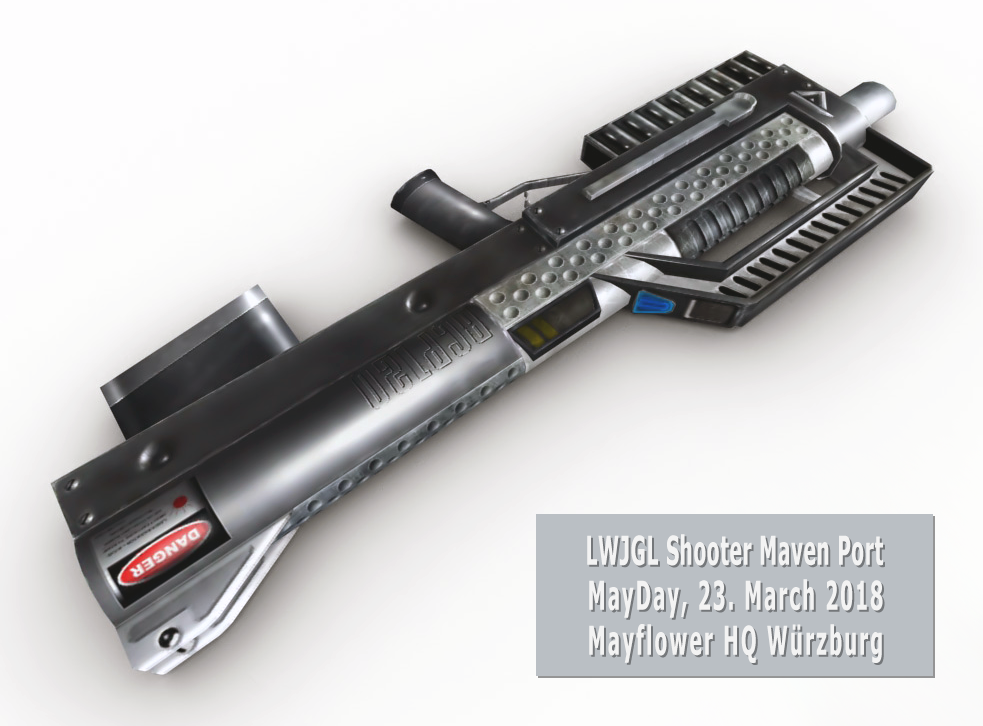
<style>
.page{position:relative;width:983px;height:726px}
.page>*{position:absolute;margin:0}
.t1{font:40px/45px "Tahoma-Bold";letter-spacing:0.052em;color:#f3f3f3;scale:0.5 1}
.t2{font:40px/45px "Tahoma-Bold";letter-spacing:0.112em;color:#f3f3f3;scale:0.5 1}
.t3{font:40px/45px "Tahoma-Bold";letter-spacing:0.12em;color:#f3f3f3;scale:0.5 1}
</style>
<div class="page">
<p class="t1" style="left:587px;top:534px;width:296px;height:129px;text-align:right">LWJGL Shooter Maven Port<br><span class="t2">MayDay, 23. March 2018<br></span><span class="t3">Mayflower HQ Würzburg</span></p>
</div>
